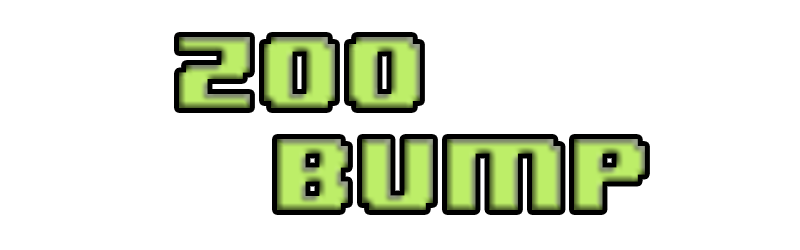
<style>
.page{position:relative;width:800px;height:250px;background:#ffffff}
.page>*{position:absolute;margin:0}
.t1{font:85px "8BITWONDERNominal"}
</style>
<div class="page">
<p class="t1" style="left:179px;top:37px;width:466px;height:173px;text-align:center">Zoo<br>         bump</p>
</div>
